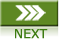
<style>
.page{position:relative;width:59px;height:42px;background:#5e8823}
.page>*{position:absolute;margin:0}
.t1{font:12.4px "Verdana";color:#3c7b11}
</style>
<div class="page">
<p class="t1" style="left:15px;top:29px;width:33px;height:10px">NEXT</p>
</div>
